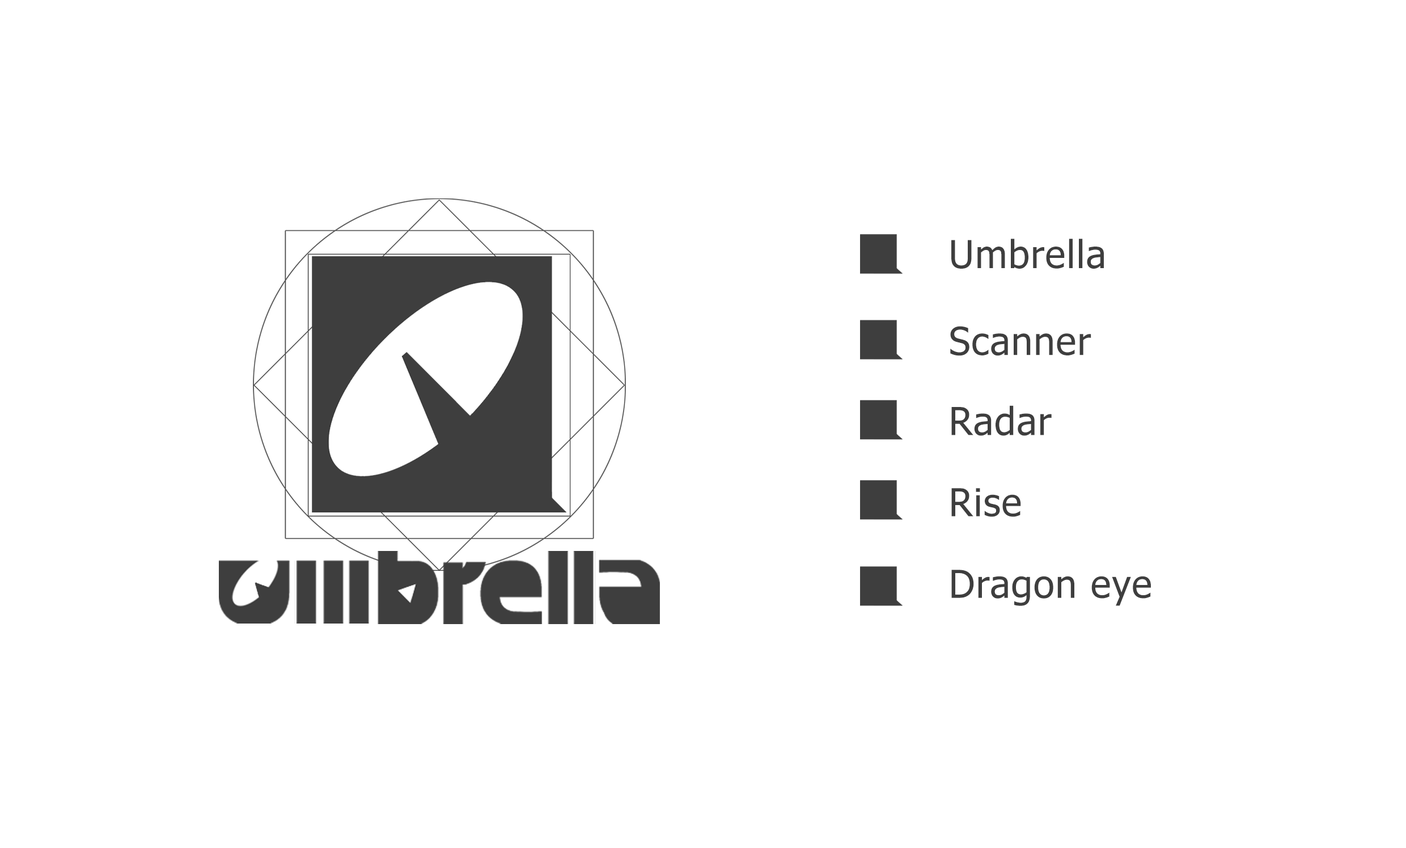
<style>
.page{position:relative;width:1406px;height:848px;background:#ffffff}
.page>*{position:absolute;margin:0}
.t1{font:38.5px "Tahoma";letter-spacing:0.025em;color:#3e3e3e}
</style>
<div class="page">
<p class="t1" style="left:951px;top:239px;width:153px;height:30px">Umbrella</p>
<p class="t1" style="left:950px;top:326px;width:141px;height:30px">Scanner</p>
<p class="t1" style="left:951px;top:405px;width:101px;height:31px">Radar</p>
<p class="t1" style="left:951px;top:488px;width:70px;height:29px">Rise</p>
<p class="t1" style="left:951px;top:570px;width:200px;height:36px">Dragon eye</p>
</div>
